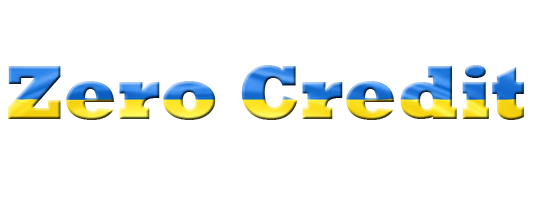
<style>
.page{position:relative;width:533px;height:200px;background:#ffffff}
.page>*{position:absolute;margin:0}
.t1{font:78px "Rockwell-ExtraBold"}
</style>
<div class="page">
<p class="t1" style="left:8px;top:65px;width:516px;height:55px">Zero Credit</p>
</div>
